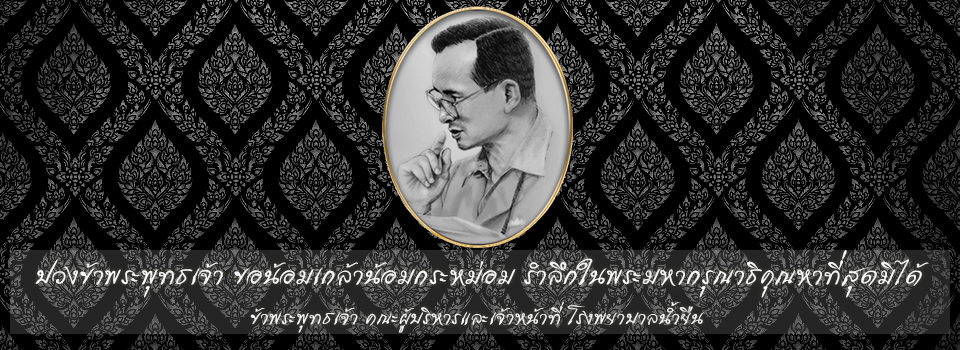
<style>
.page{position:relative;width:960px;height:350px;background:#000000}
.page>*{position:absolute;margin:0}
.t1{font:32px "V.11.3SuphanFontsTHAI-Italic";color:#f9f9fb}
.t2{font:24px "V.11.3SuphanFontsTHAI-Italic";color:#f9f9fb}
</style>
<div class="page">
<p class="t1" style="left:35px;top:250px;width:894px;height:48px">ปวงข้าพระพุทธเจ้า ขอน้อมเกล้าน้อมกระหม่อม รำลึกในพระมหากรุณาธิคุณหาที่สุดมิได้</p>
<p class="t2" style="left:250px;top:302px;width:454px;height:31px">ข้าพระพุทธเจ้า คณะผู้บริหารและเจ้าหน้าที่ โรงพยาบาลน้ำยืน</p>
</div>
